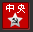
<style>
.page{position:relative;width:33px;height:32px;background:#c50000}
.page>*{position:absolute;margin:0}
.t1{font:10.4px "SimSun";color:#ffffff}
</style>
<div class="page">
<p class="t1" style="left:6px;top:4px;width:19px;height:9px">中央</p>
</div>
